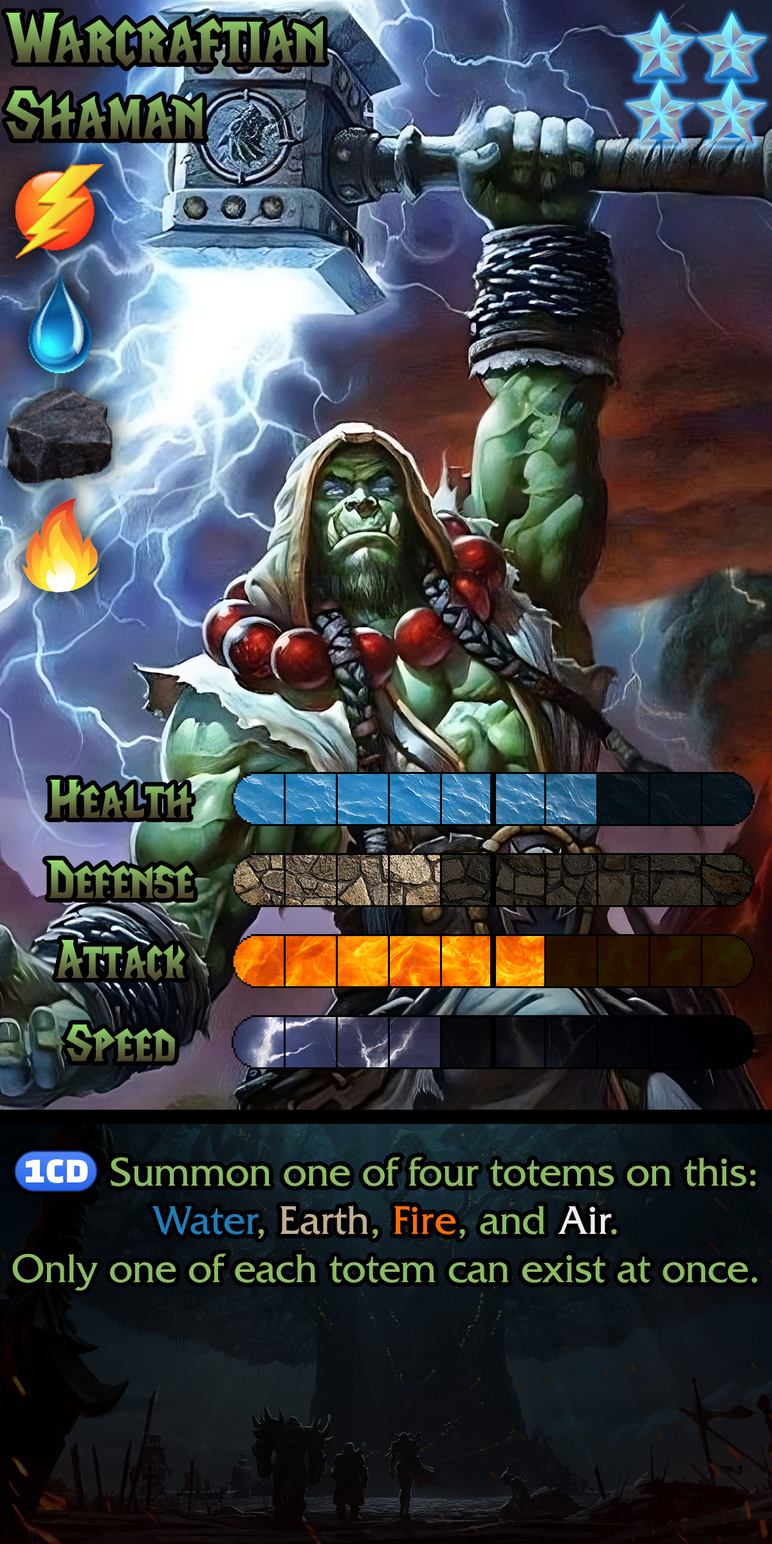
<style>
.page{position:relative;width:772px;height:1544px}
.page>*{position:absolute;margin:0}
.t1{font:121.6px "LifeCraft"}
.t2{font:92.7px "LifeCraft"}
.t3{font:71.4px/48.3px "FrizQuadrataStd";color:#8bbb62}
.t4{font:71.4px/48.3px "stoogedings-Regular";color:#8bbb62}
.t5{font:71.4px/48.3px "FrizQuadrataStd";color:#1c7eb9}
.t6{font:71.4px/48.3px "FrizQuadrataStd";color:#c1af91}
.t7{font:71.4px/48.3px "FrizQuadrataStd";color:#fb6d02}
.t8{font:71.4px/48.3px "FrizQuadrataStd";color:#f1ebee}
</style>
<div class="page">
<p class="t1" style="left:5px;top:12px;width:321px;height:55px">Warcraftian</p>
<p class="t1" style="left:6px;top:90px;width:199px;height:49px">Shaman</p>
<p class="t2" style="left:49px;top:780px;width:143px;height:38px">Health</p>
<p class="t2" style="left:46px;top:860px;width:148px;height:39px">Defense</p>
<p class="t2" style="left:56px;top:939px;width:130px;height:43px">Attack</p>
<p class="t2" style="left:66px;top:1024px;width:109px;height:38px">Speed</p>
<p class="t3" style="left:12px;top:1151px;width:745px;height:140px;text-align:center"><span class="t4">(1CD)</span> Summon one of four totems on this: <span class="t5">Water</span>, <span class="t6">Earth</span>, <span class="t7">Fire</span>, and <span class="t8">Air</span>.<br>Only one of each totem can exist at once.</p>
</div>
